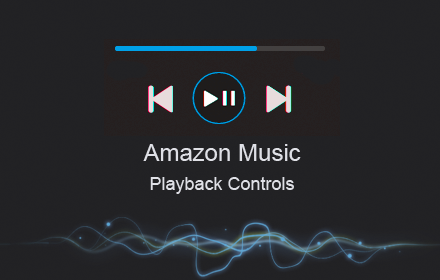
<style>
.page{position:relative;width:440px;height:280px;background:#222224}
.page>*{position:absolute;margin:0}
.t1{font:18px "ArialMT";color:#dfe0e6}
.t2{font:24px "ArialMT";color:#dfe0e6}
</style>
<div class="page">
<p class="t1" style="left:143px;top:144px;width:158px;height:50px;text-align:center"><span class="t2">Amazon Music<br> <br></span>Playback Controls</p>
</div>
